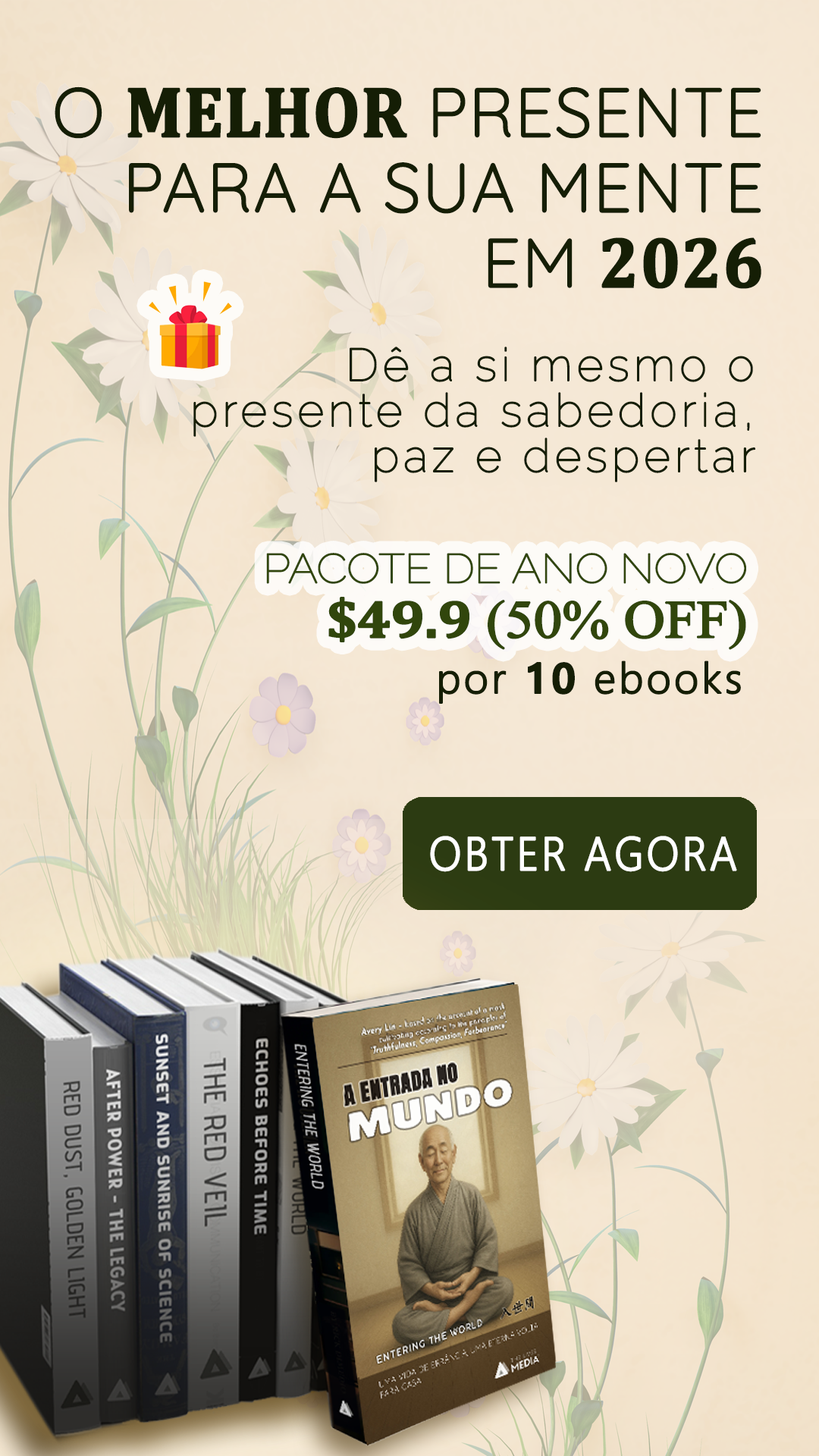
<style>
.page{position:relative;width:819px;height:1456px}
.page>*{position:absolute;margin:0}
.t1{font:68.2px/75.2px "Quicksand-Light";color:#151e05;font-weight:bold}
.t2{font:71.7px/75.2px "Cambria-Bold";color:#151e05;font-weight:bold;scale:0.93 1}
.t3{font:45.5px/45.5px "Raleway-Thin";letter-spacing:0.075em;color:#151e05;font-weight:bold}
.t4{font:40.9px/54.6px "Raleway-Thin";letter-spacing:-0.025em;color:#31460c;font-weight:bold;scale:1.07 1}
.t5{font:53.2px/54.6px "Cambria-Bold";letter-spacing:-0.025em;color:#31460c;font-weight:bold;scale:1.07 1}
.t6{font:53.2px/54.6px "TimesNewRomanPSMT";letter-spacing:-0.025em;color:#31460c;font-weight:bold;scale:1.07 1}
.t7{font:41.7px "MalgunGothic-Semilight";letter-spacing:0.05em;color:#151e05;font-weight:bold}
.t8{font:41.7px "MalgunGothicBold";letter-spacing:0.05em;color:#151e05;font-weight:bold}
.t9{font:45.9px "MalgunGothic-Semilight";letter-spacing:0.05em;color:#ffffff;font-weight:bold;scale:0.91 1}
</style>
<div class="page">
<p class="t1" style="left:55px;top:86px;width:706px;height:203px;text-align:right">O <span class="t2">MELHOR</span> PRESENTE PARA A SUA MENTE <br>EM <span class="t2">2026</span></p>
<p class="t3" style="left:193px;top:347px;width:562px;height:135px;text-align:right">Dê a si mesmo o <br>presente da sabedoria, <br>paz e despertar</p>
<p class="t4" style="left:266px;top:553px;width:480px;height:97px;text-align:right">PACOTE DE ANO NOVO<br> <span class="t5">$49.9</span><span class="t6"> (50% OFF)</span></p>
<p class="t7" style="left:439px;top:660px;width:302px;height:44px">por <span class="t8">10</span> ebooks</p>
<p class="t9" style="left:430px;top:836px;width:307px;height:36px">OBTER AGORA</p>
</div>
